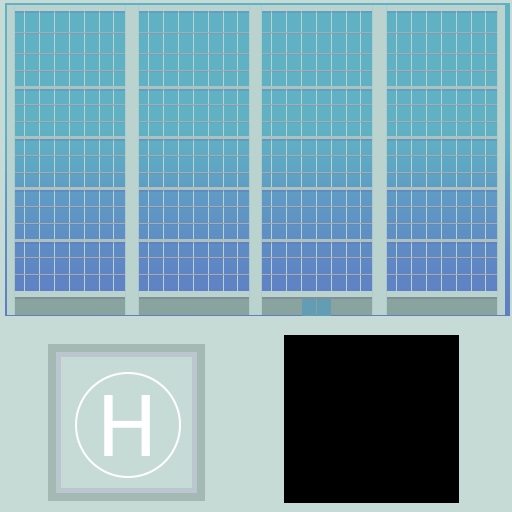
<style>
.page{position:relative;width:512px;height:512px;background:#c7dbd6}
.page>*{position:absolute;margin:0}
.t1{font:90.9px "MS-UIGothic";letter-spacing:-0.025em;color:#ffffff}
</style>
<div class="page">
<p class="t1" style="left:104px;top:395px;width:46px;height:61px">H</p>
</div>
